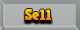
<style>
.page{position:relative;width:80px;height:30px}
.page>*{position:absolute;margin:0}
.t1{font:14.1px "HVDComicSerifPro";color:#000000}
</style>
<div class="page">
<p class="t1" style="left:25px;top:9px;width:27px;height:11px">Sell</p>
</div>
